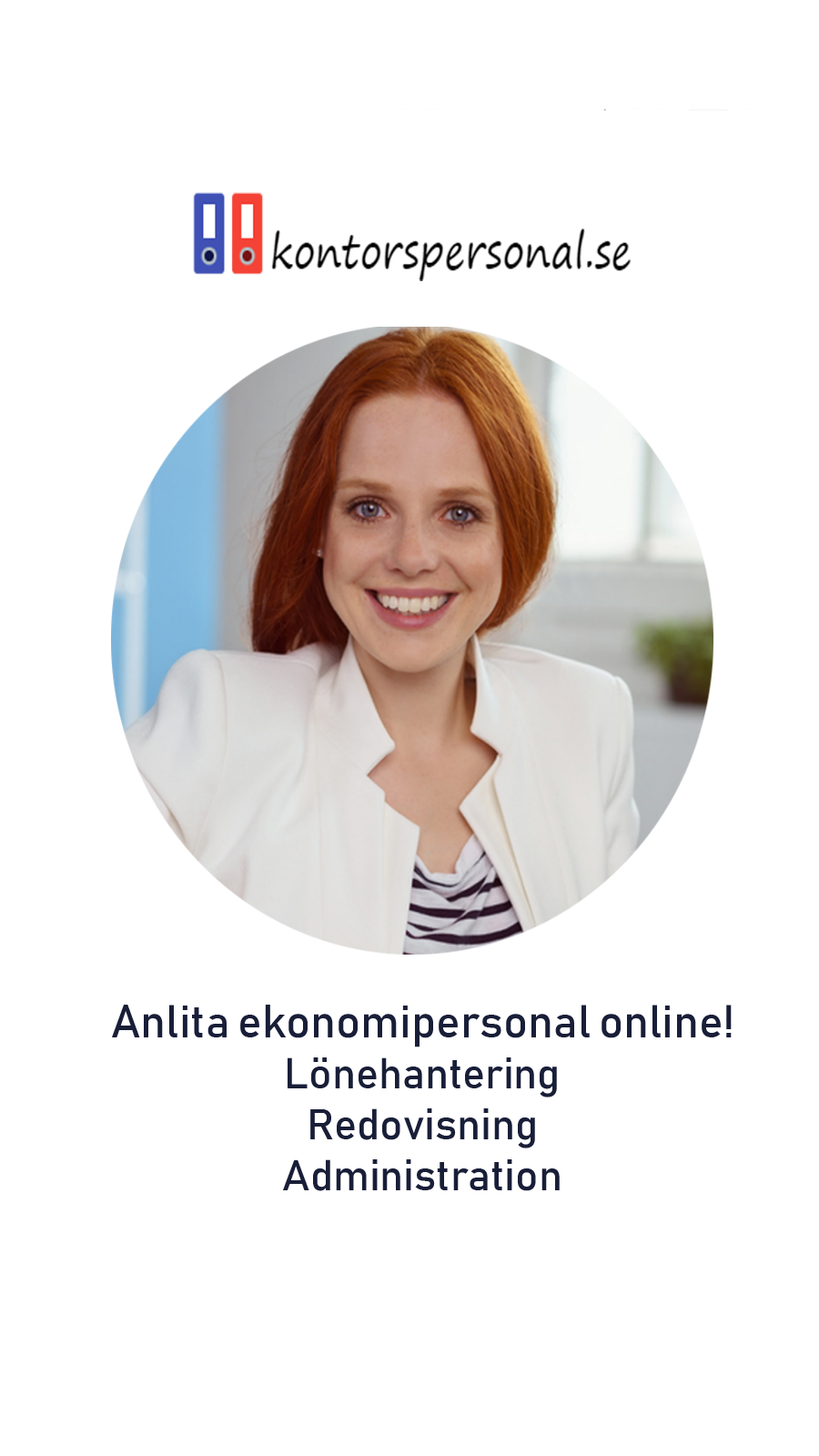
<style>
.page{position:relative;width:819px;height:1456px;background:#ffffff}
.page>*{position:absolute;margin:0}
.t1{font:42.5px "Bahnschrift";color:#191e38}
.t2{font:45.5px "Bahnschrift";color:#191e38}
</style>
<div class="page">
<p class="t1" style="left:112px;top:1005px;width:620px;height:186px;text-align:center"><span class="t2">Anlita ekonomipersonal online!<br></span>Lönehantering<br>Redovisning<br>Administration</p>
</div>
